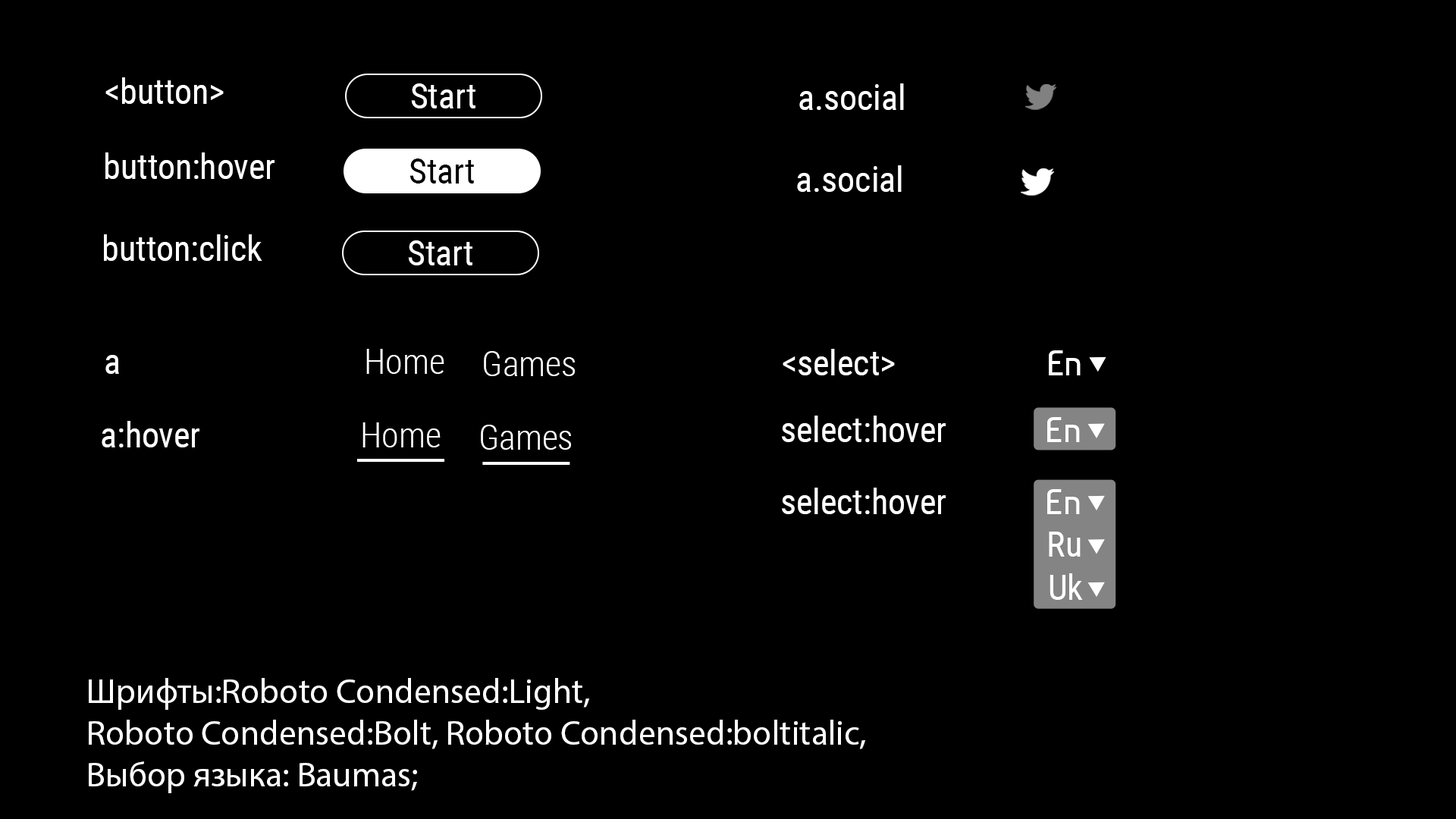
<style>
.page{position:relative;width:1456px;height:819px;background:#000000}
.page>*{position:absolute;margin:0}
.t1{font:34.8px "RobotoCondensed-Regular";color:#ffffff}
.t2{font:34.8px "RobotoCondensed-Regular";color:#000000}
.t3{font:34.8px "RobotoCondensed-Light";color:#ffffff}
.t4{font:34.8px "Baumans-Regular";color:#ffffff}
.t5{font:34.8px "MyriadPro-Regular";color:#ffffff}
</style>
<div class="page">
<p class="t1" style="left:105px;top:77px;width:119px;height:27px">&lt;button&gt;</p>
<p class="t1" style="left:411px;top:83px;width:64px;height:25px">Start</p>
<p class="t1" style="left:799px;top:83px;width:105px;height:27px">a.social</p>
<p class="t1" style="left:105px;top:152px;width:170px;height:27px">button:hover</p>
<p class="t2" style="left:409px;top:158px;width:65px;height:26px">Start</p>
<p class="t1" style="left:797px;top:165px;width:105px;height:27px">a.social</p>
<p class="t1" style="left:104px;top:234px;width:158px;height:27px">button:click</p>
<p class="t1" style="left:408px;top:240px;width:64px;height:25px">Start</p>
<p class="t3" style="left:366px;top:349px;width:78px;height:25px">Home</p>
<p class="t3" style="left:484px;top:351px;width:91px;height:25px">Games</p>
<p class="t1" style="left:783px;top:349px;width:112px;height:26px">&lt;select&gt;</p>
<p class="t4" style="left:1049px;top:350px;width:32px;height:25px">En</p>
<p class="t1" style="left:105px;top:355px;width:14px;height:19px">a</p>
<p class="t1" style="left:102px;top:421px;width:97px;height:26px">a:hover</p>
<p class="t3" style="left:362px;top:422px;width:79px;height:25px">Home</p>
<p class="t3" style="left:481px;top:425px;width:90px;height:25px">Games</p>
<p class="t1" style="left:782px;top:416px;width:164px;height:26px">select:hover</p>
<p class="t4" style="left:1047px;top:417px;width:33px;height:25px">En</p>
<p class="t1" style="left:782px;top:488px;width:164px;height:26px">select:hover</p>
<p class="t4" style="left:1047px;top:489px;width:33px;height:25px">En</p>
<p class="t1" style="left:1049px;top:532px;width:32px;height:25px">Ru</p>
<p class="t1" style="left:1050px;top:573px;width:33px;height:27px">Uk</p>
<p class="t5" style="left:89px;top:678px;width:776px;height:115px">Шрифты:Roboto Condensed:Light,<br>Roboto Condensed:Bolt, Roboto Condensed:boltitalic,<br>Выбор языка: Baumas;</p>
</div>
